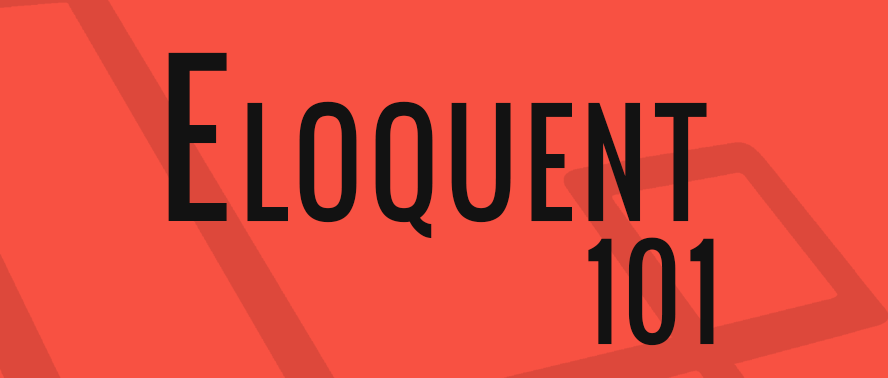
<style>
.page{position:relative;width:888px;height:378px;background:#f85142}
.page>*{position:absolute;margin:0}
.t1{font:192.1px "Oswald-Regular";letter-spacing:0.06em;color:#121212;font-variant:small-caps;scale:0.88 1}
.t2{font:120px "Oswald-Regular";letter-spacing:0.06em;color:#121212;font-variant:small-caps;scale:0.88 1}
</style>
<div class="page">
<p class="t1" style="left:168px;top:52px;width:539px;height:186px">Eloquent</p>
<p class="t2" style="left:588px;top:237px;width:126px;height:109px">101</p>
</div>
